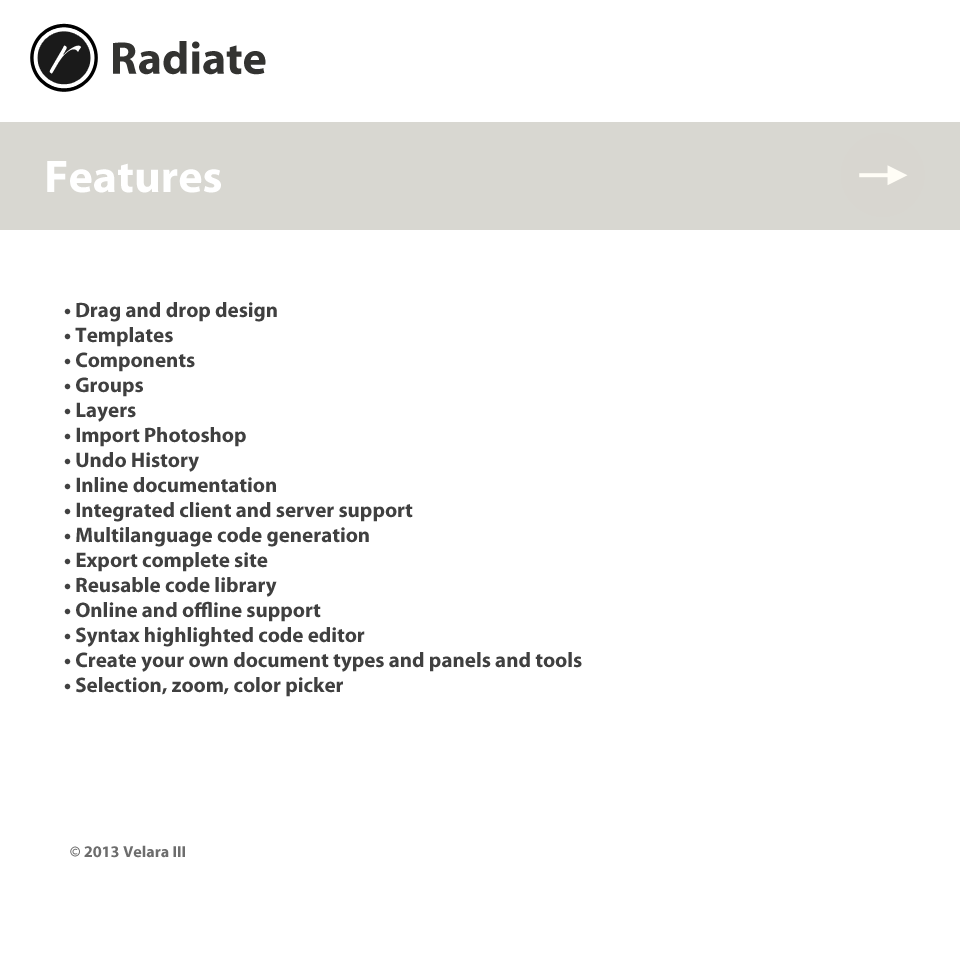
<style>
.page{position:relative;width:960px;height:960px;background:#ffffff}
.page>*{position:absolute;margin:0}
.t1{font:46px "MyriadPro-Bold";color:#333331}
.t2{font:46px "MyriadPro-Bold";color:#ffffff}
.t3{font:21px/25px "MyriadPro-Bold";color:#404040}
.t4{font:16px "MyriadPro-Bold";color:#6d6d6d}
</style>
<div class="page">
<p class="t1" style="left:113px;top:41px;width:153px;height:34px">Radiate</p>
<p class="t2" style="left:47px;top:161px;width:174px;height:32px">Features</p>
<p class="t3" style="left:64px;top:302px;width:518px;height:395px">• Drag and drop design<br>• Templates<br>• Components<br>• Groups<br>• Layers<br>• Import Photoshop<br>• Undo History<br>• Inline documentation<br>• Integrated client and server support<br>• Multilanguage code generation<br>• Export complete site<br>• Reusable code library<br>• Online and offline support<br>• Syntax highlighted code editor<br>• Create your own document types and panels and tools<br>• Selection, zoom, color picker</p>
<p class="t4" style="left:70px;top:845px;width:115px;height:13px">© 2013 Velara III</p>
</div>
